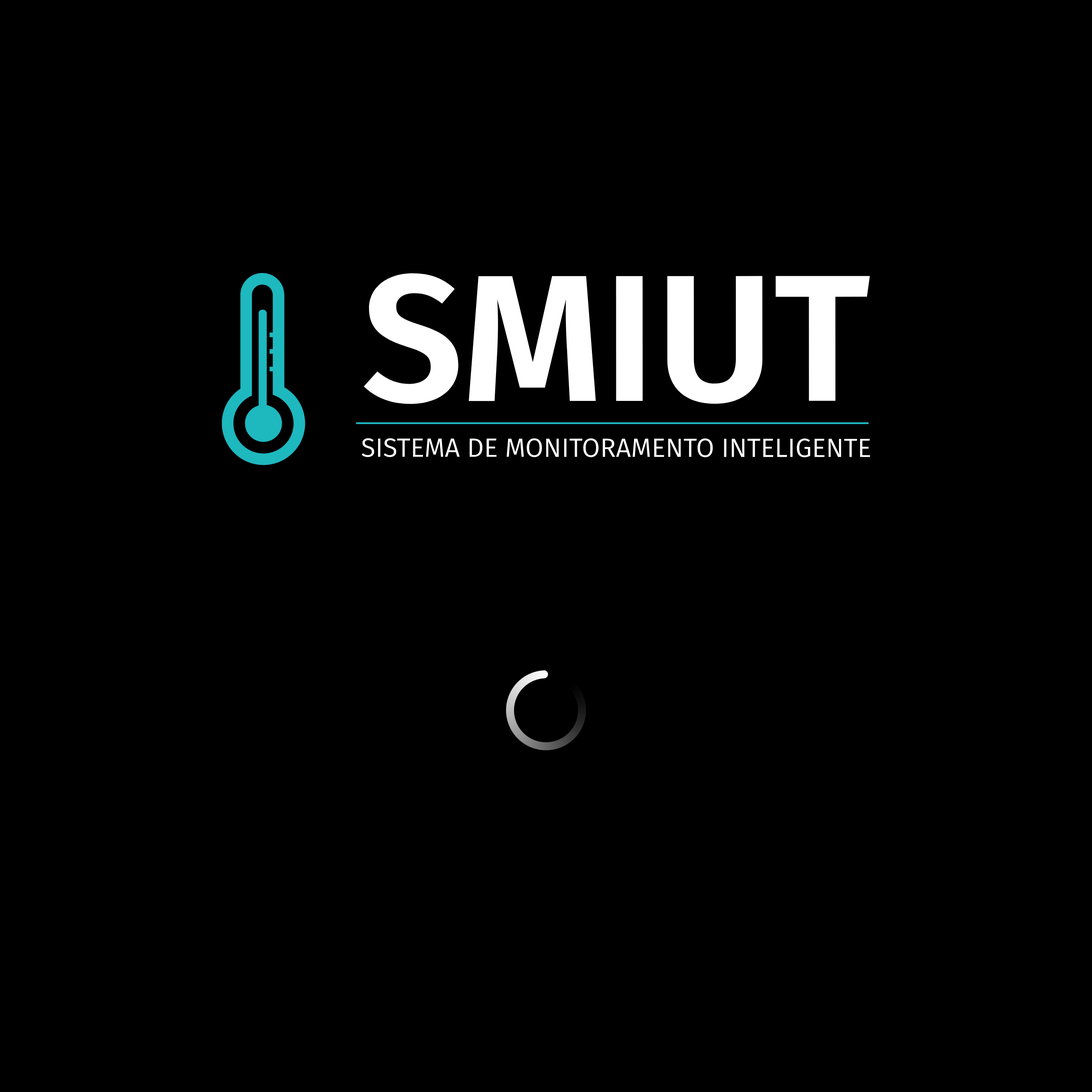
<style>
.page{position:relative;width:1092px;height:1092px;background:#000000}
.page>*{position:absolute;margin:0}
.t1{font:180.3px "FiraSans-SemiBold";color:#ffffff}
.t2{font:26.4px "FiraSans-Book";color:#ffffff}
</style>
<div class="page">
<p class="t1" style="left:364px;top:273px;width:506px;height:131px">SMIUT</p>
<p class="t2" style="left:362px;top:438px;width:508px;height:19px">SISTEMA DE MONITORAMENTO INTELIGENTE</p>
</div>
